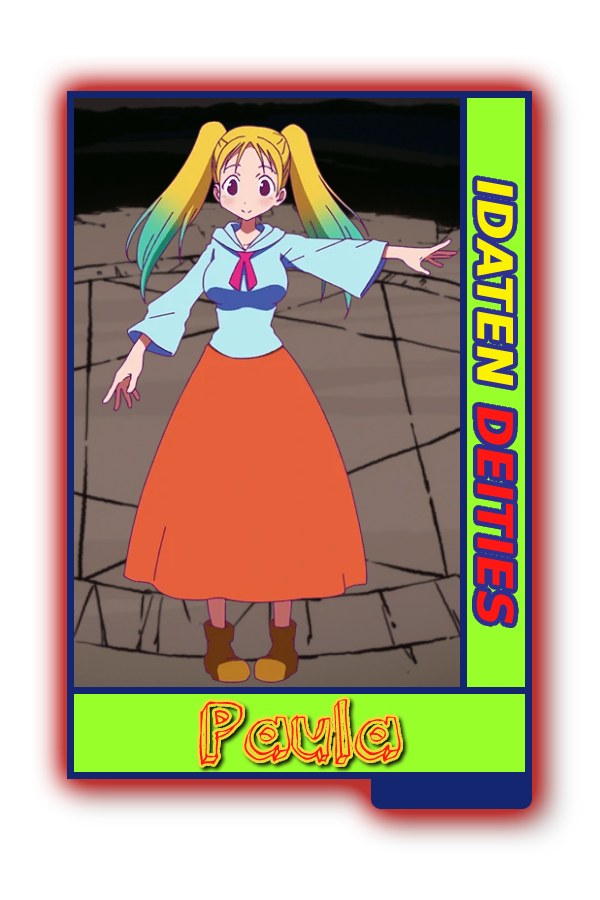
<style>
.page{position:relative;width:600px;height:900px;background:#ffffff}
.page>*{position:absolute;margin:0}
.t1{font:48.8px "MADETOMMY-Bold";color:#ff1713;font-weight:bold;font-style:italic}
.t2{font:48.8px "MADETOMMY-Bold";color:#fdf103;font-weight:bold;font-style:italic}
.t3{font:75px "3dumb";color:#ff1611}
</style>
<div class="page">
<p class="t1" style="left:476px;top:180px;width:38px;height:444px;rotate:90deg"><span class="t2">IDATEN </span>DEITIES</p>
<p class="t3" style="left:199px;top:699px;width:202px;height:67px">Paula</p>
</div>
